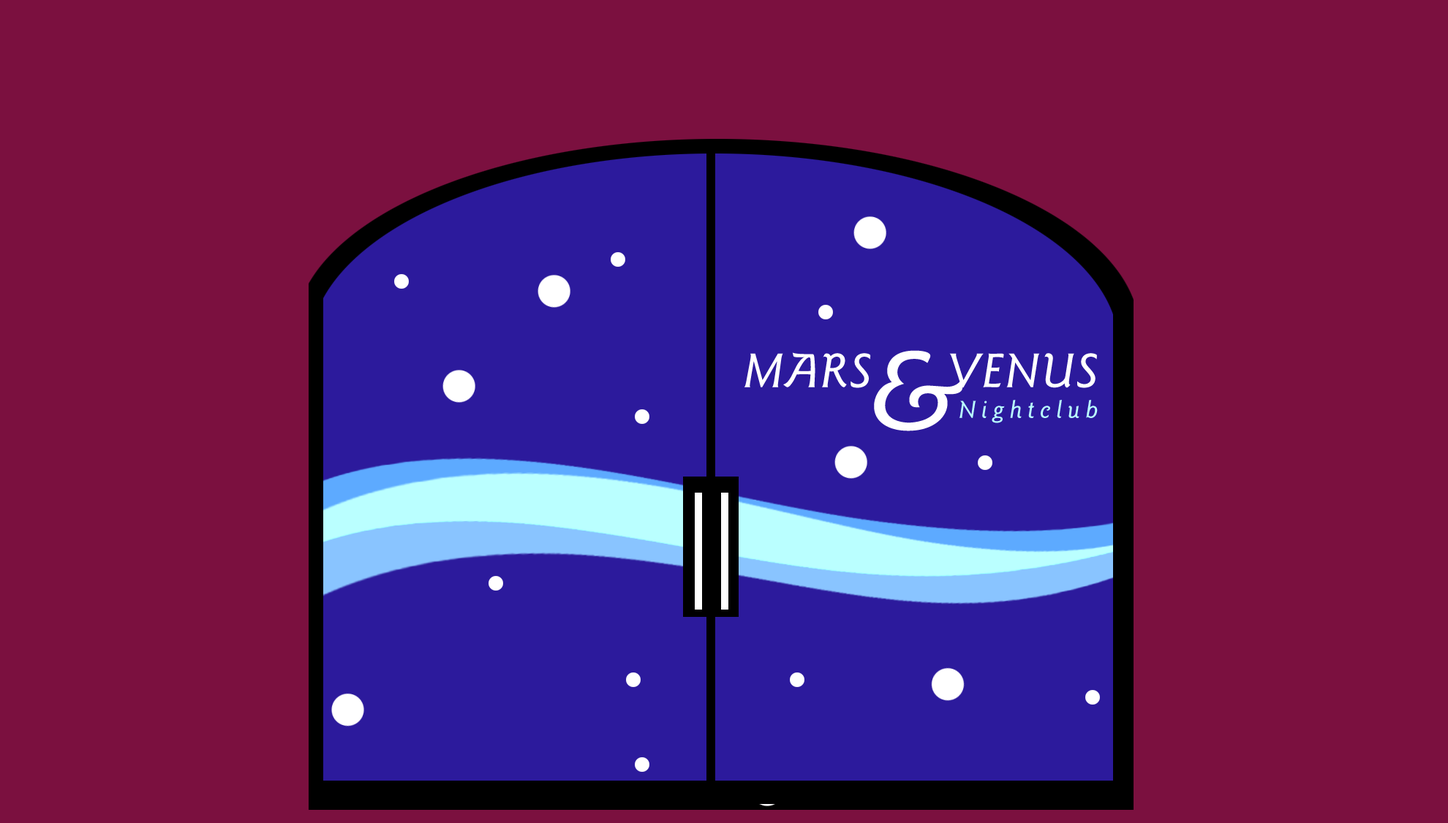
<style>
.page{position:relative;width:1448px;height:823px;background:#7b103f}
.page>*{position:absolute;margin:0}
.t1{font:50.3px "GoudySans-MediumItalic";letter-spacing:0.05em;color:#ffffff}
.t2{font:25.6px "GoudySans-MediumItalic";letter-spacing:0.2em;color:#baffff}
.t3{font:117px "GoudySans-MediumItalic";letter-spacing:0.2em;color:#ffffff}
</style>
<div class="page">
<p class="t1" style="left:744px;top:353px;width:354px;height:70px;text-align:right">MARS     VENUS<br><span class="t2">Nightclub</span></p>
<p class="t3" style="left:874px;top:350px;width:88px;height:81px">&amp;</p>
</div>
